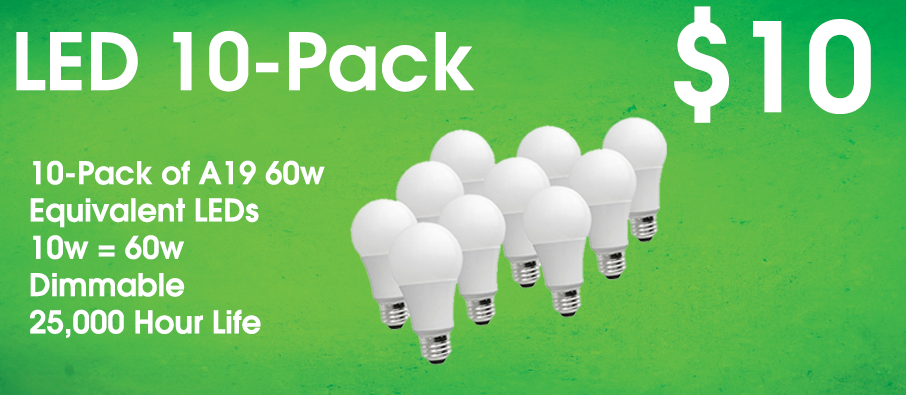
<style>
.page{position:relative;width:906px;height:395px}
.page>*{position:absolute;margin:0}
.t1{font:123.1px "ITCAvantGardePro-Demi";color:#ffffff}
.t2{font:78.3px "ITCAvantGardePro-Demi";color:#ffffff}
.t3{font:31.1px "ITCAvantGardePro-Demi";color:#ffffff}
</style>
<div class="page">
<p class="t1" style="left:674px;top:6px;width:197px;height:117px">$10</p>
<p class="t2" style="left:16px;top:30px;width:458px;height:62px">LED 10-Pack</p>
<p class="t3" style="left:30px;top:160px;width:295px;height:178px">10-Pack of A19 60w<br>Equivalent LEDs<br>10w = 60w<br>Dimmable<br>25,000 Hour Life</p>
</div>
